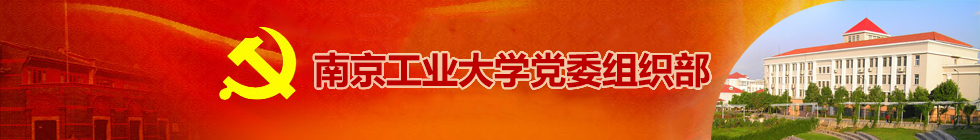
<style>
.page{position:relative;width:980px;height:140px}
.page>*{position:absolute;margin:0}
.t1{font:36px "MicrosoftYaHei-Bold";color:#bd0000}
</style>
<div class="page">
<p class="t1" style="left:314px;top:52px;width:396px;height:36px">南京工业大学党委组织部</p>
</div>
